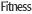
<style>
.page{position:relative;width:32px;height:14px;background:#ffffff}
.page>*{position:absolute;margin:0}
.t1{font:14.4px "AmiraParadiso";letter-spacing:-0.08em;color:#343434;scale:0.83 1}
</style>
<div class="page">
<p class="t1" style="left:1px;top:1px;width:31px;height:10px">Fitness</p>
</div>
